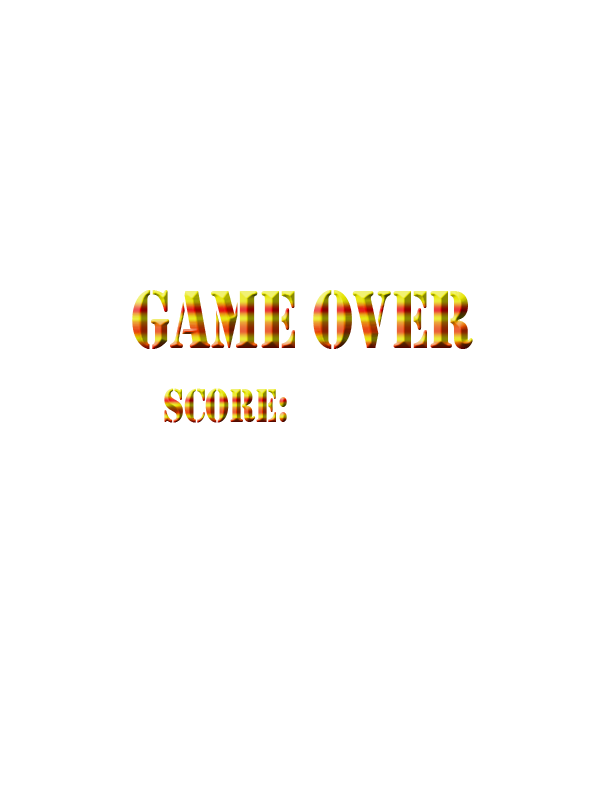
<style>
.page{position:relative;width:600px;height:800px;background:#ffffff}
.page>*{position:absolute;margin:0}
.t1{font:85px "Stencil";letter-spacing:-0.01em;scale:0.76 1}
.t2{font:49.6px "Stencil";letter-spacing:-0.01em;scale:0.76 1}
</style>
<div class="page">
<p class="t1" style="left:132px;top:290px;width:341px;height:59px">Game Over</p>
<p class="t2" style="left:164px;top:388px;width:123px;height:35px">Score:</p>
</div>
